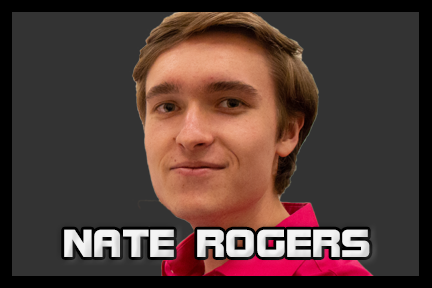
<style>
.page{position:relative;width:432px;height:288px;background:#333333}
.page>*{position:absolute;margin:0}
.t1{font:41.7px "BolsterBold";color:#f3f3f3}
</style>
<div class="page">
<p class="t1" style="left:64px;top:229px;width:306px;height:28px">NATE ROGERS</p>
</div>
